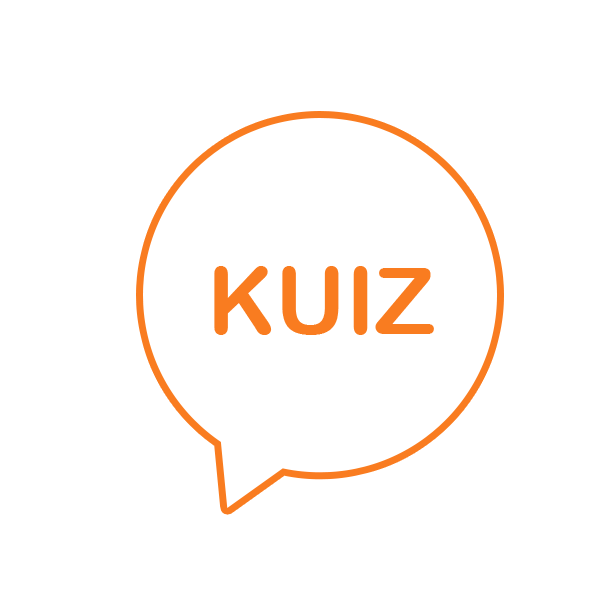
<style>
.page{position:relative;width:600px;height:600px;background:#ffffff}
.page>*{position:absolute;margin:0}
.t1{font:93px "ArialRoundedMTBold";color:#f97c20}
</style>
<div class="page">
<p class="t1" style="left:214px;top:266px;width:220px;height:69px">KUIZ</p>
</div>
